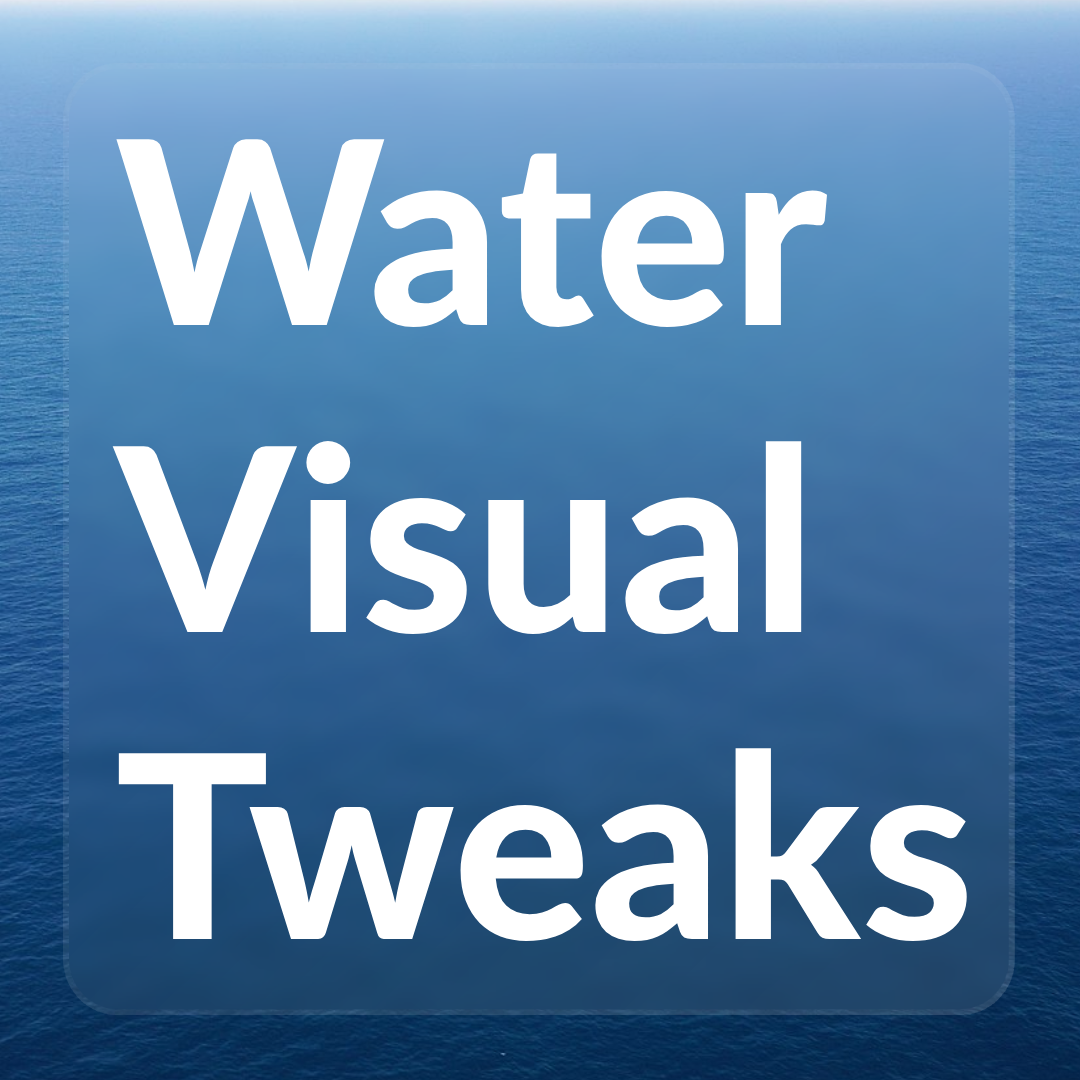
<style>
.page{position:relative;width:1080px;height:1080px}
.page>*{position:absolute;margin:0}
.t1{font:256px "Lato-Heavy";color:#ffffff}
</style>
<div class="page">
<p class="t1" style="left:112px;top:139px;width:855px;height:802px">Water<br>Visual<br>Tweaks</p>
</div>
